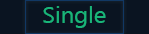
<style>
.page{position:relative;width:149px;height:34px;background:#0a1421}
.page>*{position:absolute;margin:0}
.t1{font:23.3px "SegoeUISymbol";color:#19b579}
</style>
<div class="page">
<p class="t1" style="left:43px;top:6px;width:63px;height:22px">Single</p>
</div>
